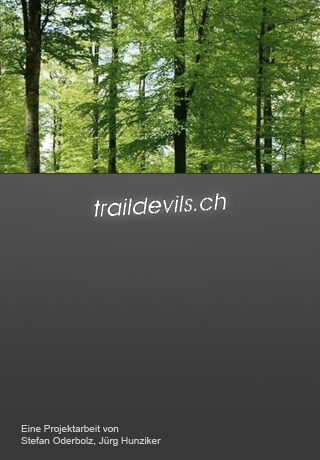
<style>
.page{position:relative;width:320px;height:460px}
.page>*{position:absolute;margin:0}
.t1{font:10px "ArialMT";color:#cacaca}
</style>
<div class="page">
<p class="t1" style="left:21px;top:425px;width:140px;height:21px">Eine Projektarbeit von<br>Stefan Oderbolz, Jürg Hunziker</p>
</div>
